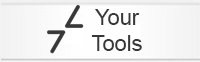
<style>
.page{position:relative;width:200px;height:62px}
.page>*{position:absolute;margin:0}
.t1{font:21.8px "ArialMT";color:#383838}
</style>
<div class="page">
<p class="t1" style="left:91px;top:9px;width:51px;height:42px;text-align:center">Your<br>Tools</p>
</div>
